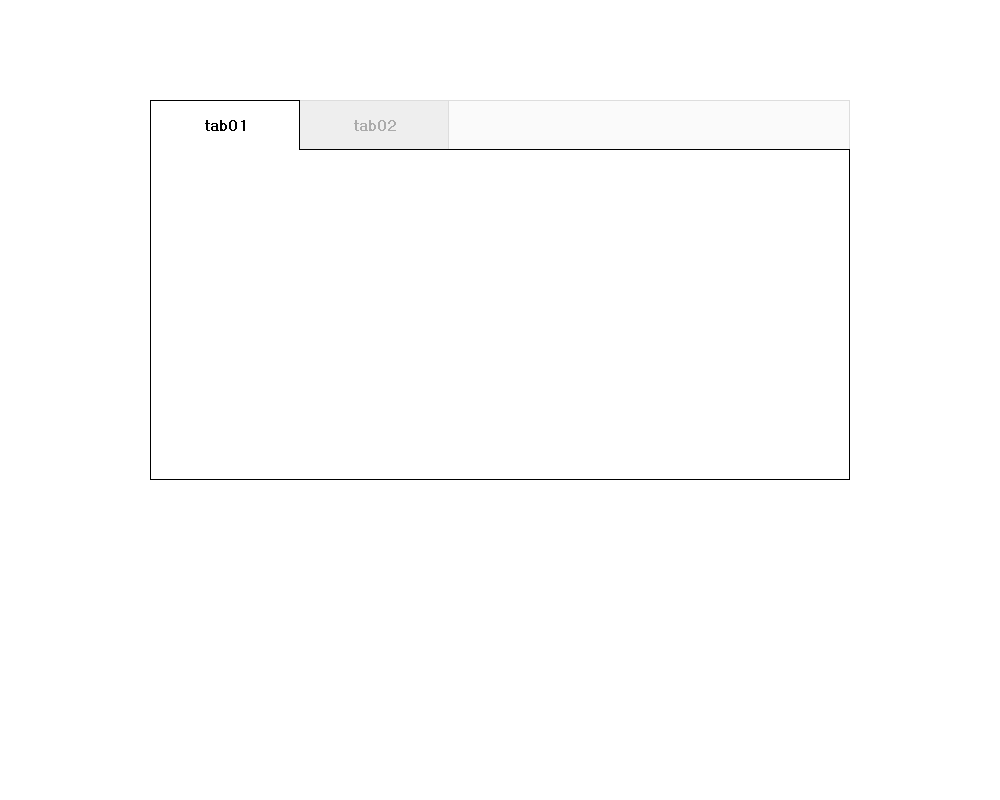
<style>
.page{position:relative;width:1000px;height:800px;background:#ffffff}
.page>*{position:absolute;margin:0}
.t1{font:14px "Dotum";color:#000000;font-weight:bold}
.t2{font:14px "Dotum";color:#aaaaaa;font-weight:bold}
</style>
<div class="page">
<p class="t1" style="left:205px;top:120px;width:40px;height:11px">tab01</p>
<p class="t2" style="left:354px;top:120px;width:42px;height:11px">tab02</p>
</div>
